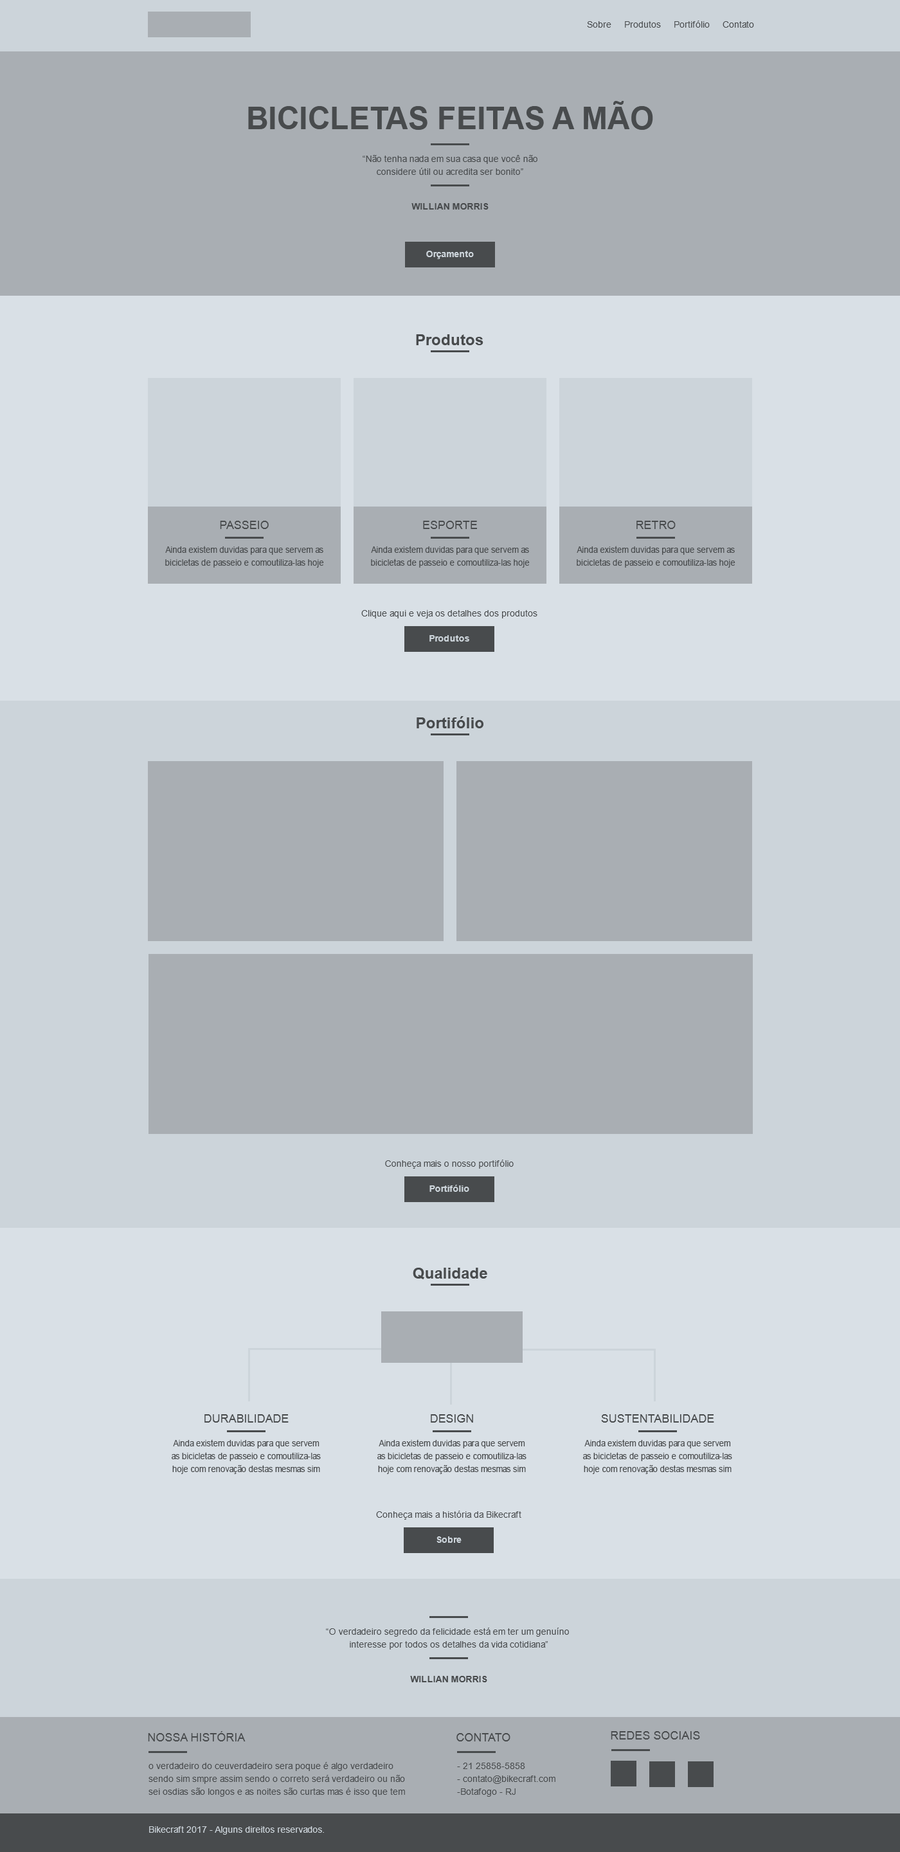
<style>
.page{position:relative;width:900px;height:1852px;background:#d9e0e6}
.page>*{position:absolute;margin:0}
.t1{font:9px "ArialMT";color:#484b4d}
.t2{font:30.9px "Arial-BoldMT";color:#484b4d;text-transform:uppercase}
.t3{font:9px/12.9px "ArialMT";color:#484b4d}
.t4{font:9px "Arial-BoldMT";color:#484b4d;text-transform:uppercase}
.t5{font:9px "Arial-BoldMT";color:#ccd4da}
.t6{font:15.4px "Arial-BoldMT";color:#484b4d}
.t7{font:11.6px "ArialMT";color:#484b4d}
.t8{font:9px/12.9px "ArialMT";color:#484b4d;scale:0.92 1}
.t9{font:9px/12.9px "ArialMT";color:#484b4d;scale:0.91 1}
.t10{font:11.6px "ArialMT";color:#484b4d;text-transform:uppercase}
.t11{font:9px "ArialMT";color:#ccd4da}
</style>
<div class="page">
<p class="t1" style="left:587px;top:21px;width:167px;height:7px">Sobre     Produtos     Portifólio     Contato</p>
<p class="t2" style="left:248px;top:101px;width:405px;height:29px">Bicicletas feitas a Mão</p>
<p class="t3" style="left:363px;top:155px;width:174px;height:20px;text-align:center">“Não tenha nada em sua casa que você não<br>considere útil ou acredita ser bonito”</p>
<p class="t4" style="left:411px;top:203px;width:78px;height:7px">WILLIAN MORRIS</p>
<p class="t5" style="left:426px;top:251px;width:48px;height:8px">Orçamento</p>
<p class="t6" style="left:416px;top:334px;width:67px;height:11px">Produtos</p>
<p class="t7" style="left:220px;top:521px;width:49px;height:8px">PASSEIO</p>
<p class="t7" style="left:423px;top:521px;width:54px;height:8px">ESPORTE</p>
<p class="t7" style="left:636px;top:521px;width:40px;height:8px">RETRO</p>
<p class="t8" style="left:165px;top:546px;width:159px;height:22px;text-align:center">Ainda existem duvidas para que servem as bicicletas de passeio e comoutiliza-las hoje</p>
<p class="t8" style="left:371px;top:546px;width:159px;height:22px;text-align:center">Ainda existem duvidas para que servem as bicicletas de passeio e comoutiliza-las hoje</p>
<p class="t8" style="left:577px;top:546px;width:158px;height:22px;text-align:center">Ainda existem duvidas para que servem as bicicletas de passeio e comoutiliza-las hoje</p>
<p class="t1" style="left:361px;top:610px;width:176px;height:8px">Clique aqui e veja os detalhes dos produtos</p>
<p class="t5" style="left:429px;top:635px;width:40px;height:7px">Produtos</p>
<p class="t6" style="left:417px;top:716px;width:66px;height:12px">Portifólio</p>
<p class="t1" style="left:385px;top:1160px;width:129px;height:9px">Conheça mais o nosso portifólio</p>
<p class="t5" style="left:429px;top:1185px;width:40px;height:7px">Portifólio</p>
<p class="t6" style="left:413px;top:1268px;width:74px;height:11px">Qualidade</p>
<p class="t7" style="left:204px;top:1414px;width:85px;height:9px">DURABILIDADE</p>
<p class="t7" style="left:431px;top:1414px;width:42px;height:9px">DESIGN</p>
<p class="t7" style="left:601px;top:1414px;width:113px;height:9px">SUSTENTABILIDADE</p>
<p class="t9" style="left:172px;top:1439px;width:149px;height:35px;text-align:center">Ainda existem duvidas para que servem as bicicletas de passeio e comoutiliza-las hoje com renovação destas mesmas sim</p>
<p class="t9" style="left:377px;top:1439px;width:149px;height:35px;text-align:center">Ainda existem duvidas para que servem as bicicletas de passeio e comoutiliza-las hoje com renovação destas mesmas sim</p>
<p class="t9" style="left:583px;top:1439px;width:149px;height:35px;text-align:center">Ainda existem duvidas para que servem as bicicletas de passeio e comoutiliza-las hoje com renovação destas mesmas sim</p>
<p class="t1" style="left:376px;top:1511px;width:145px;height:9px">Conheça mais a história da Bikecraft</p>
<p class="t5" style="left:437px;top:1536px;width:25px;height:7px">Sobre</p>
<p class="t3" style="left:326px;top:1628px;width:243px;height:22px;text-align:center">“O verdadeiro segredo da felicidade está em ter um genuíno <br>interesse por todos os detalhes da vida cotidiana”</p>
<p class="t4" style="left:410px;top:1676px;width:77px;height:6px">WILLIAN MORRIS</p>
<p class="t10" style="left:148px;top:1731px;width:98px;height:11px">Nossa História</p>
<p class="t10" style="left:456px;top:1733px;width:54px;height:9px">CONTATO</p>
<p class="t10" style="left:611px;top:1731px;width:89px;height:9px">REDES SOCIAIS</p>
<p class="t3" style="left:148px;top:1762px;width:257px;height:35px">o verdadeiro do ceuverdadeiro sera poque é algo verdadeiro sendo sim smpre assim sendo o correto será verdadeiro ou não sei osdias são longos e as noites são curtas mas é isso que tem</p>
<p class="t3" style="left:457px;top:1763px;width:98px;height:34px">- 21 25858-5858<br>- contato@bikecraft.com<br>-Botafogo - RJ</p>
<p class="t11" style="left:149px;top:1826px;width:175px;height:9px">Bikecraft 2017 - Alguns direitos reservados.</p>
</div>
